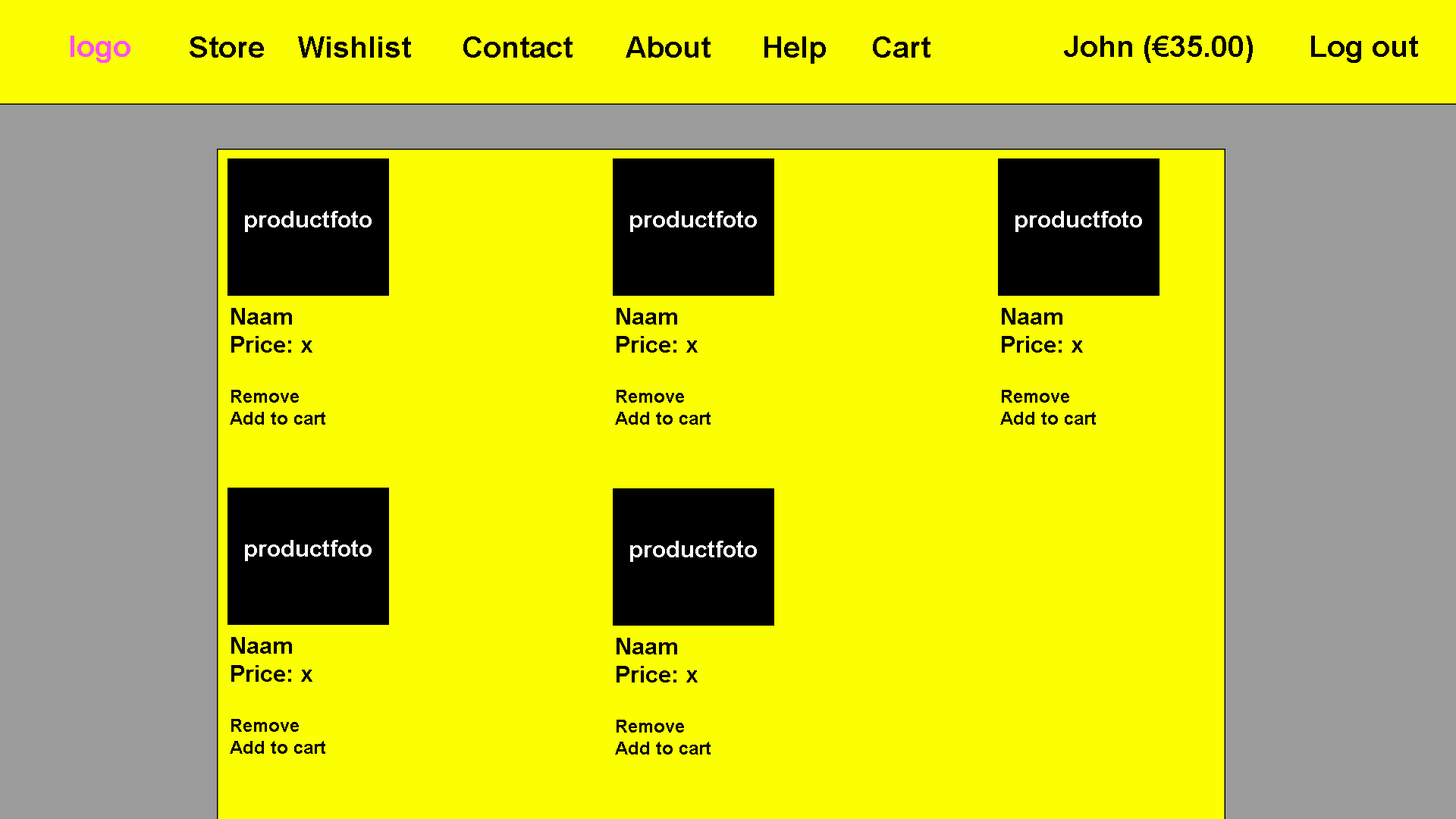
<style>
.page{position:relative;width:1456px;height:819px;background:#fbff02}
.page>*{position:absolute;margin:0}
.t1{font:29.6px "Arial-BoldMT";color:#ff4cff}
.t2{font:29.6px "Arial-BoldMT";color:#000000}
.t3{font:29.6px "Arial-BoldMT";color:#010101}
.t4{font:23.5px "Arial-BoldMT";color:#ffffff}
.t5{font:18.2px "Arial-BoldMT";color:#010101}
.t6{font:23.5px "Arial-BoldMT";color:#010101}
</style>
<div class="page">
<p class="t1" style="left:71px;top:36px;width:59px;height:27px">logo</p>
<p class="t2" style="left:190px;top:36px;width:740px;height:28px">Store  Wishlist  Contact  About  Help  Cart</p>
<p class="t3" style="left:1064px;top:36px;width:354px;height:27px">John (€35.00)  Log out</p>
<p class="t4" style="left:245px;top:211px;width:127px;height:21px">productfoto</p>
<p class="t4" style="left:630px;top:211px;width:127px;height:21px">productfoto</p>
<p class="t4" style="left:1015px;top:211px;width:127px;height:21px">productfoto</p>
<p class="t5" style="left:230px;top:308px;width:95px;height:117px"><span class="t6">Naam<br>Price: x<br><br></span>Remove<br>Add to cart</p>
<p class="t5" style="left:615px;top:308px;width:96px;height:117px"><span class="t6">Naam<br>Price: x<br><br></span>Remove<br>Add to cart</p>
<p class="t5" style="left:1000px;top:308px;width:96px;height:117px"><span class="t6">Naam<br>Price: x<br><br></span>Remove<br>Add to cart</p>
<p class="t4" style="left:245px;top:540px;width:127px;height:21px">productfoto</p>
<p class="t4" style="left:630px;top:541px;width:127px;height:21px">productfoto</p>
<p class="t5" style="left:230px;top:637px;width:95px;height:117px"><span class="t6">Naam<br>Price: x<br><br></span>Remove<br>Add to cart</p>
<p class="t5" style="left:615px;top:638px;width:96px;height:117px"><span class="t6">Naam<br>Price: x<br><br></span>Remove<br>Add to cart</p>
</div>
